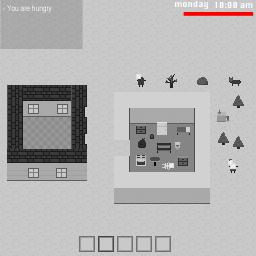
<style>
.page{position:relative;width:256px;height:256px;background:#c8c8c8}
.page>*{position:absolute;margin:0}
.t1{font:8px "ArialNarrow";color:#ffffff}
.t2{font:8px "Silom";color:#ffffff}
</style>
<div class="page">
<p class="t1" style="left:3px;top:5px;width:49px;height:8px">- You are hungry</p>
<p class="t2" style="left:175px;top:1px;width:33px;height:8px">monday</p>
<p class="t2" style="left:215px;top:2px;width:38px;height:6px">10:00 am</p>
</div>
